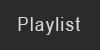
<style>
.page{position:relative;width:100px;height:50px;background:#2b2b2b}
.page>*{position:absolute;margin:0}
.t1{font:20px "ArialNarrow";letter-spacing:0.075em;color:#d9d9d8}
</style>
<div class="page">
<p class="t1" style="left:18px;top:17px;width:62px;height:18px">Playlist</p>
</div>
